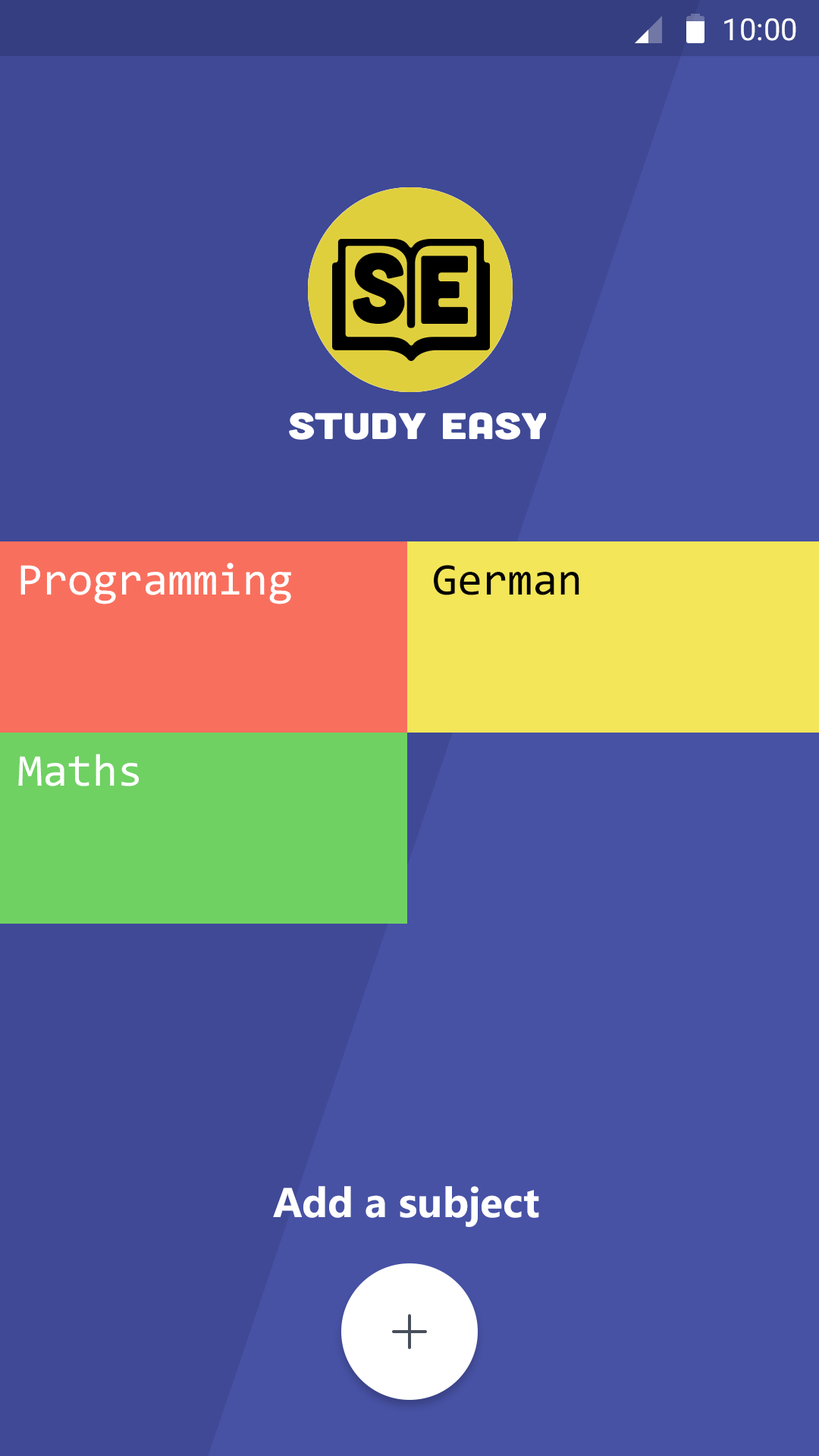
<style>
.page{position:relative;width:819px;height:1456px;background:#4752a5}
.page>*{position:absolute;margin:0}
.t1{font:30.3px "Roboto-Regular";color:#ffffff}
.t2{font:45.5px "Consolas";color:#ffffff}
.t3{font:45.5px "Consolas";color:#000000}
.t4{font:41.7px "Ebrima-Bold";color:#ffffff}
</style>
<div class="page">
<p class="t1" style="left:724px;top:18px;width:72px;height:23px">10:00</p>
<p class="t2" style="left:20px;top:563px;width:271px;height:41px">Programming</p>
<p class="t3" style="left:434px;top:565px;width:145px;height:30px">German</p>
<p class="t2" style="left:18px;top:754px;width:121px;height:32px">Maths</p>
<p class="t4" style="left:273px;top:1186px;width:266px;height:41px">Add a subject</p>
</div>
